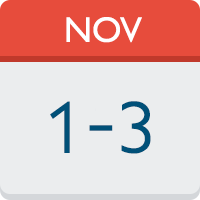
<style>
.page{position:relative;width:200px;height:200px;background:#ebedee}
.page>*{position:absolute;margin:0}
.t1{font:36px "GillSans";color:#ffffff}
.t2{font:88px "MonotypeGurmukhi";color:#005078}
</style>
<div class="page">
<p class="t1" style="left:66px;top:17px;width:76px;height:26px">NOV</p>
<p class="t2" style="left:50px;top:101px;width:101px;height:53px">1-3</p>
</div>
